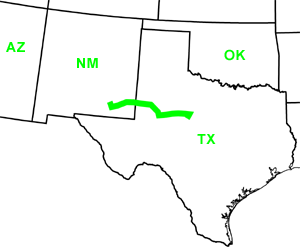
<style>
.page{position:relative;width:300px;height:251px;background:#ffffff}
.page>*{position:absolute;margin:0}
.t1{font:14px "Arial-BoldMT";letter-spacing:0.05em;color:#00ff00}
</style>
<div class="page">
<p class="t1" style="left:6px;top:42px;width:19px;height:10px">AZ</p>
<p class="t1" style="left:224px;top:49px;width:22px;height:12px">OK</p>
<p class="t1" style="left:77px;top:58px;width:21px;height:10px">NM</p>
<p class="t1" style="left:197px;top:134px;width:19px;height:10px">TX</p>
</div>
